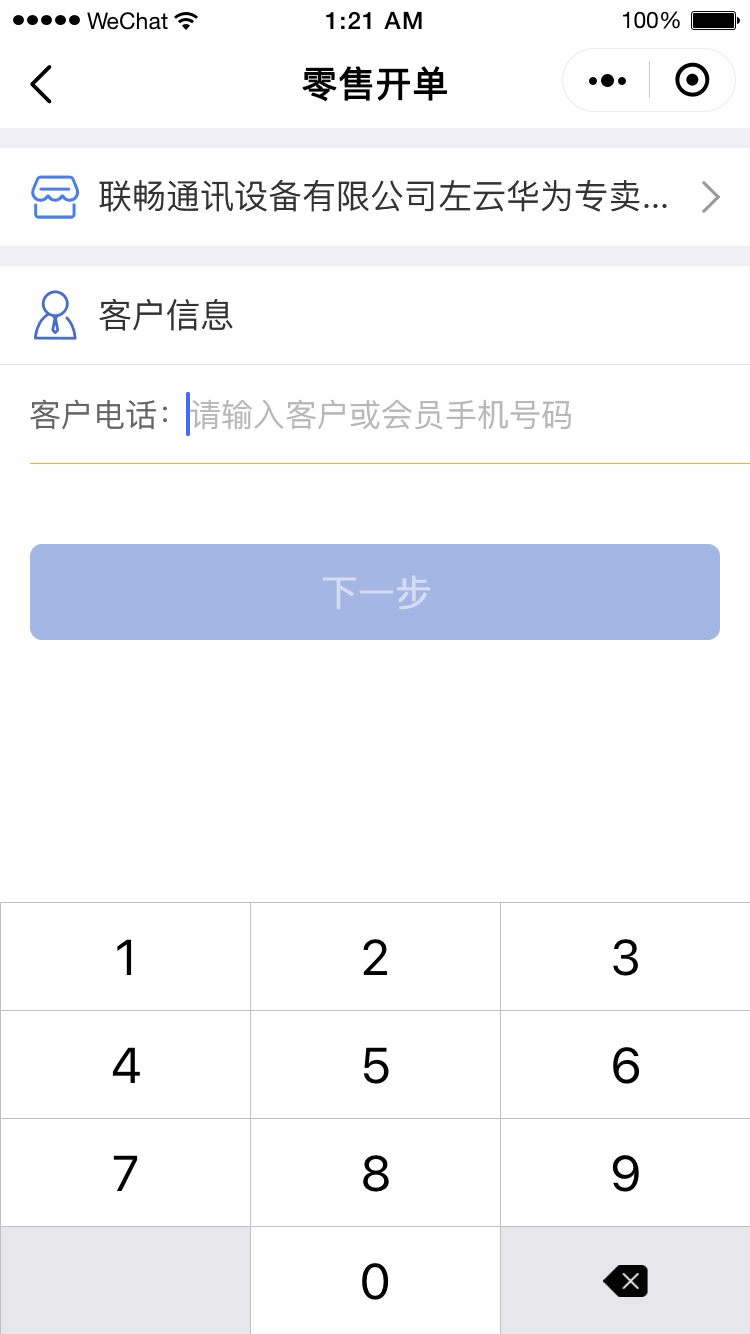
<style>
.page{position:relative;width:750px;height:1334px;background:#ffffff}
.page>*{position:absolute;margin:0}
.t1{font:36px "PingFang-SC-Medium";color:#000000;font-weight:bold}
.t2{font:34px "PingFang-SC-Medium";color:#333333}
.t3{font:32px "PingFang-SC-Medium";color:#b8b8b8}
.t4{font:32px "PingFang-SC-Medium";color:#666666}
.t5{font:36px "PingFang-SC-Medium";color:#d4ddf2;font-weight:bold}
</style>
<div class="page">
<p class="t1" style="left:302px;top:66px;width:145px;height:36px">零售开单</p>
<p class="t2" style="left:99px;top:179px;width:568px;height:33px">联畅通讯设备有限公司左云华为专卖...</p>
<p class="t2" style="left:99px;top:299px;width:134px;height:32px">客户信息</p>
<p class="t3" style="left:30px;top:399px;width:541px;height:31px"><span class="t4">客户电话：</span>请输入客户或会员手机号码</p>
<p class="t5" style="left:323px;top:575px;width:107px;height:35px">下一步</p>
</div>
